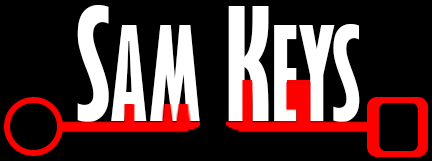
<style>
.page{position:relative;width:432px;height:161px;background:#000000}
.page>*{position:absolute;margin:0}
.t1{font:119.9px "GillSansMT-ExtraCondensedBold";color:#ffffff}
.t2{font:143.9px "GillSansMT-ExtraCondensedBold";color:#ffffff}
</style>
<div class="page">
<p class="t1" style="left:77px;top:5px;width:283px;height:117px"><span class="t2">S</span>AM<span class="t2"> K</span>EYS</p>
</div>
